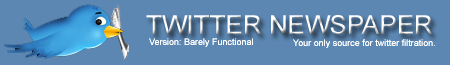
<style>
.page{position:relative;width:450px;height:65px;background:#5c87b2}
.page>*{position:absolute;margin:0}
.t1{font:26px "ArialMT";color:#ffffff}
.t2{font:9px "ArialMT";color:#ffffff}
</style>
<div class="page">
<p class="t1" style="left:146px;top:15px;width:286px;height:20px">TWITTER NEWSPAPER</p>
<p class="t2" style="left:149px;top:38px;width:104px;height:9px">Version: Barely Functional</p>
<p class="t2" style="left:293px;top:39px;width:142px;height:9px">Your only source for twitter filtration.</p>
</div>
